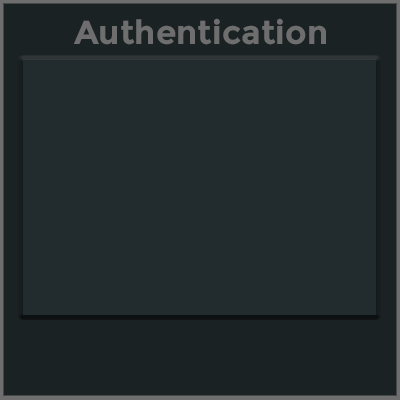
<style>
.page{position:relative;width:400px;height:400px;background:#222b2e}
.page>*{position:absolute;margin:0}
.t1{font:33.3px "Montserrat-Bold";color:#6e6e6e}
</style>
<div class="page">
<p class="t1" style="left:73px;top:18px;width:253px;height:27px">Authentication</p>
</div>
